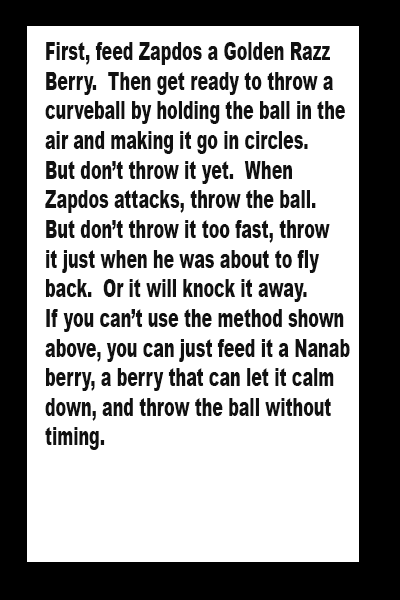
<style>
.page{position:relative;width:400px;height:600px;background:#ffffff}
.page>*{position:absolute;margin:0}
.t1{font:24.7px "Arial-Black";color:#111111;scale:0.64 1}
</style>
<div class="page">
<p class="t1" style="left:45px;top:42px;width:305px;height:408px">First, feed Zapdos a Golden Razz <br>Berry.  Then get ready to throw a<br>curveball by holding the ball in the<br>air and making it go in circles.<br>But don’t throw it yet.  When<br>Zapdos attacks, throw the ball.<br>But don’t throw it too fast, throw<br>it just when he was about to fly<br>back.  Or it will knock it away.  <br>If you can’t use the method shown<br>above, you can just feed it a Nanab<br>berry, a berry that can let it calm <br>down, and throw the ball without<br>timing.</p>
</div>
